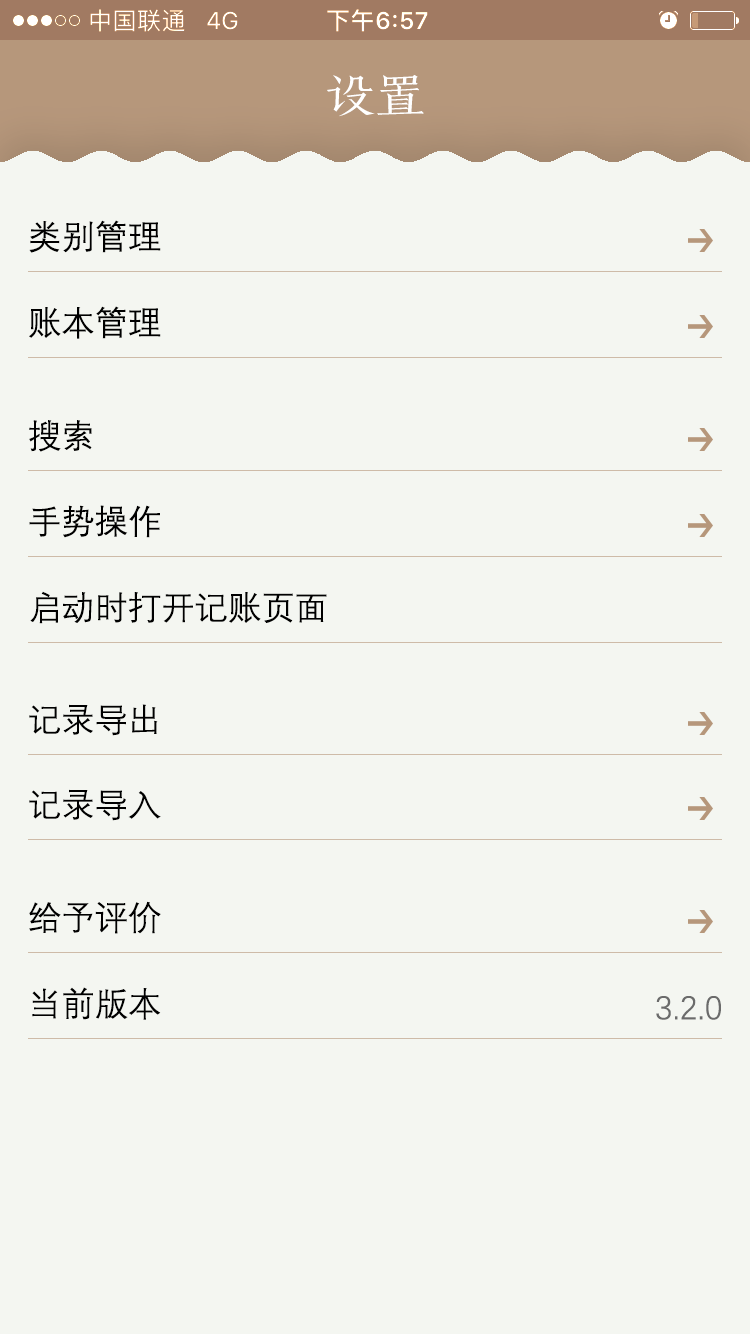
<style>
.page{position:relative;width:750px;height:1334px;background:#f4f6f1}
.page>*{position:absolute;margin:0}
.t1{font:50px "MFKeSong_Noncommercial-Regular";color:#ffffff}
.t2{font:33.3px "DengXian-Regular";color:#000000}
.t3{font:33.3px "DengXian-Regular";color:#6b6b6b}
</style>
<div class="page">
<p class="t1" style="left:327px;top:75px;width:97px;height:42px">设置</p>
<p class="t2" style="left:29px;top:220px;width:132px;height:33px">类别管理</p>
<p class="t2" style="left:29px;top:306px;width:132px;height:33px">账本管理</p>
<p class="t2" style="left:29px;top:420px;width:63px;height:32px">搜索</p>
<p class="t2" style="left:29px;top:505px;width:131px;height:33px">手势操作</p>
<p class="t2" style="left:30px;top:591px;width:297px;height:33px">启动时打开记账页面</p>
<p class="t2" style="left:29px;top:704px;width:129px;height:32px">记录导出</p>
<p class="t2" style="left:29px;top:789px;width:132px;height:32px">记录导入</p>
<p class="t2" style="left:29px;top:901px;width:132px;height:33px">给予评价</p>
<p class="t2" style="left:32px;top:987px;width:129px;height:33px">当前版本</p>
<p class="t3" style="left:656px;top:996px;width:65px;height:24px">3.2.0</p>
</div>
